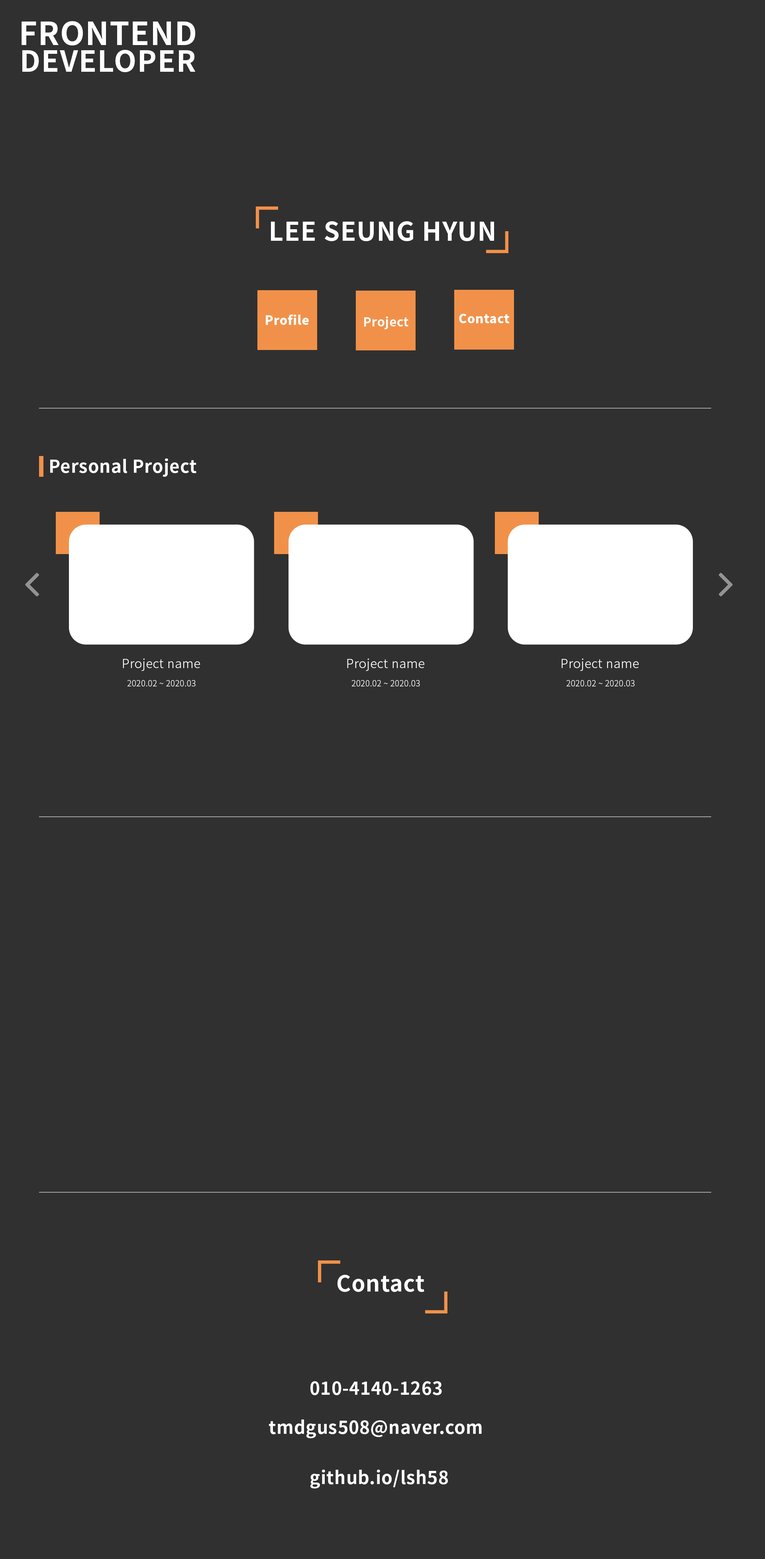
<style>
.page{position:relative;width:765px;height:1559px;background:#303030}
.page>*{position:absolute;margin:0}
.t1{font:31.7px "NotoSansKR-Bold";letter-spacing:0.025em;color:#ffffff}
.t2{font:29.3px "NotoSansKR-Bold";letter-spacing:0.025em;color:#ffffff}
.t3{font:25.9px "NotoSansKR-Bold";letter-spacing:0.025em;color:#ffffff}
.t4{font:12.6px "NotoSansKR-Black";letter-spacing:0.025em;color:#ffffff}
.t5{font:12.4px "NotoSansKR-Bold";letter-spacing:0.025em;color:#ffffff}
.t6{font:12.4px "NotoSansKR-Black";letter-spacing:0.025em;color:#ffffff}
.t7{font:17.6px "NotoSansKR-Bold";letter-spacing:0.025em;color:#ffffff}
.t8{font:12.5px "NotoSansKR-Light";letter-spacing:0.025em;color:#ffffff}
.t9{font:8.3px "NotoSansKR-Light";letter-spacing:0.025em;color:#ffffff}
.t10{font:22.1px "NotoSansKR-Bold";letter-spacing:0.025em;color:#ffffff}
.t11{font:17.8px "NotoSansKR-Bold";letter-spacing:0.025em;color:#ffffff}
</style>
<div class="page">
<p class="t1" style="left:22px;top:21px;width:173px;height:24px">FRONTEND</p>
<p class="t2" style="left:22px;top:50px;width:174px;height:22px">DEVELOPER</p>
<p class="t3" style="left:271px;top:221px;width:223px;height:20px">LEE SEUNG HYUN</p>
<p class="t4" style="left:266px;top:314px;width:43px;height:11px">Profile</p>
<p class="t5" style="left:364px;top:316px;width:44px;height:13px">Project</p>
<p class="t6" style="left:459px;top:314px;width:51px;height:9px">Contact</p>
<p class="t7" style="left:50px;top:458px;width:146px;height:19px">Personal Project</p>
<p class="t8" style="left:123px;top:658px;width:77px;height:13px">Project name</p>
<p class="t8" style="left:347px;top:658px;width:77px;height:13px">Project name</p>
<p class="t8" style="left:561px;top:658px;width:78px;height:13px">Project name</p>
<p class="t9" style="left:127px;top:680px;width:69px;height:6px">2020.02 ~ 2020.03</p>
<p class="t9" style="left:351px;top:680px;width:69px;height:6px">2020.02 ~ 2020.03</p>
<p class="t9" style="left:566px;top:680px;width:69px;height:6px">2020.02 ~ 2020.03</p>
<p class="t10" style="left:338px;top:1274px;width:86px;height:18px">Contact</p>
<p class="t11" style="left:310px;top:1381px;width:132px;height:14px">010-4140-1263</p>
<p class="t11" style="left:269px;top:1419px;width:213px;height:19px">tmdgus508@naver.com</p>
<p class="t11" style="left:310px;top:1469px;width:138px;height:19px">github.io/lsh58</p>
</div>
